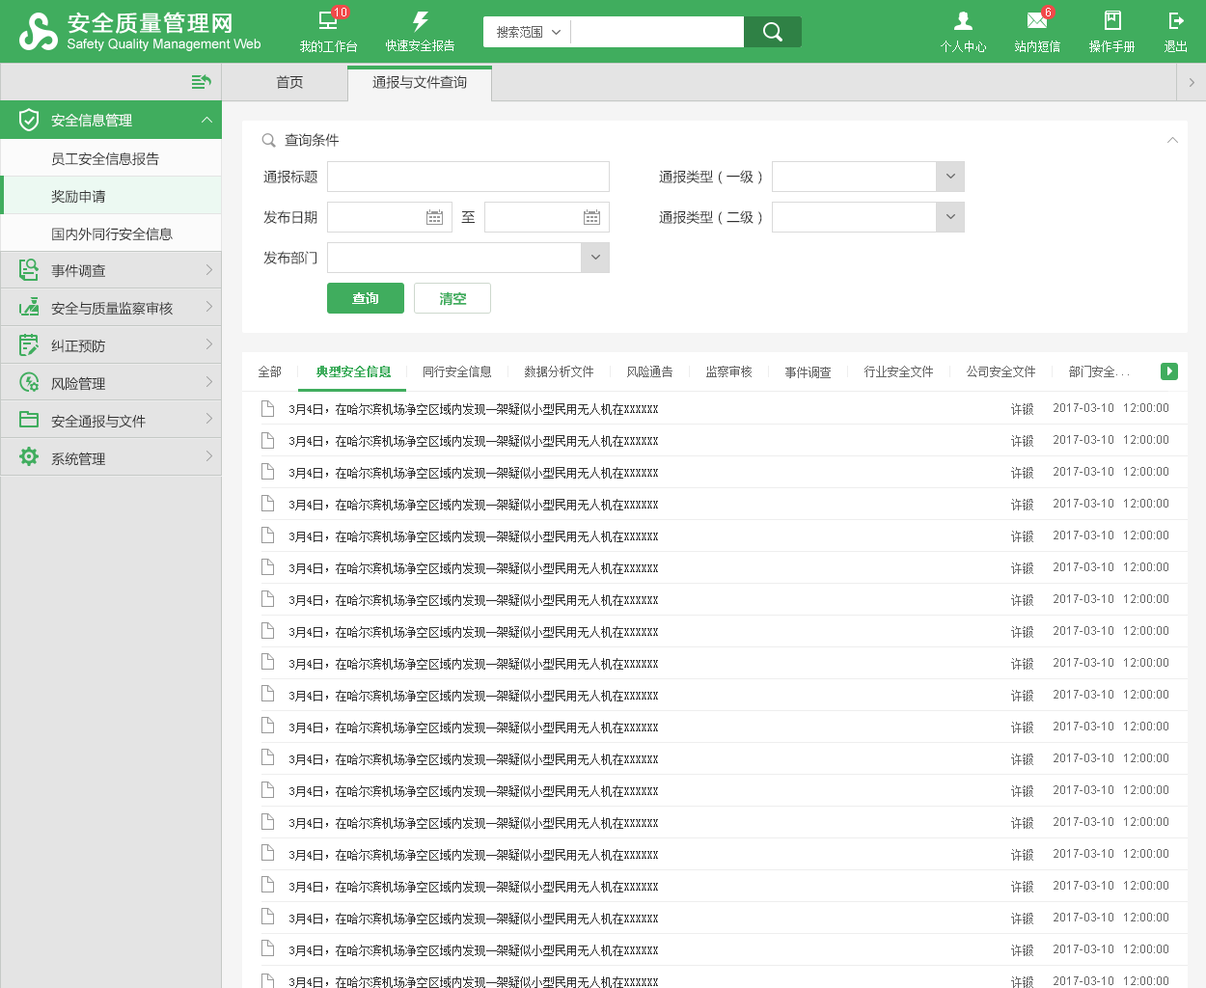
<style>
.page{position:relative;width:1206px;height:988px;background:#ffffff}
.page>*{position:absolute;margin:0}
.t1{font:13.5px "MicrosoftYaHei";color:#333333}
.t2{font:13.5px "MicrosoftYaHei";color:#ffffff}
.t3{font:13.5px/37.6px "MicrosoftYaHei";color:#333333}
.t4{font:13.5px "MicrosoftYaHei-Bold";color:#ffffff}
.t5{font:13.5px "MicrosoftYaHei-Bold";color:#40ad5e}
.t6{font:11.6px "SimSun";color:#666666}
.t7{font:11.6px "SimSun";color:#40ad5e;font-weight:bold}
</style>
<div class="page">
<p class="t1" style="left:276px;top:75px;width:27px;height:14px">首页</p>
<p class="t1" style="left:373px;top:75px;width:94px;height:14px">通报与文件查询</p>
<p class="t2" style="left:51px;top:113px;width:81px;height:14px">安全信息管理</p>
<p class="t1" style="left:285px;top:133px;width:54px;height:14px">查询条件</p>
<p class="t3" style="left:51px;top:152px;width:122px;height:89px">员工安全信息报告<br>奖励申请<br>国内外同行安全信息</p>
<p class="t1" style="left:263px;top:170px;width:55px;height:13px">通报标题</p>
<p class="t1" style="left:659px;top:170px;width:103px;height:14px">通报类型（一级）</p>
<p class="t1" style="left:263px;top:210px;width:55px;height:14px">发布日期</p>
<p class="t1" style="left:461px;top:211px;width:14px;height:12px">至</p>
<p class="t1" style="left:659px;top:210px;width:103px;height:15px">通报类型（二级）</p>
<p class="t1" style="left:263px;top:251px;width:54px;height:13px">发布部门</p>
<p class="t3" style="left:51px;top:263px;width:122px;height:203px">事件调查<br>安全与质量监察审核<br>纠正预防<br>风险管理<br>安全通报与文件<br>系统管理</p>
<p class="t4" style="left:352px;top:292px;width:26px;height:12px">查询</p>
<p class="t5" style="left:439px;top:291px;width:28px;height:15px">清空</p>
<p class="t6" style="left:259px;top:366px;width:22px;height:11px">全部</p>
<p class="t7" style="left:317px;top:366px;width:74px;height:11px">典型安全信息</p>
<p class="t6" style="left:424px;top:366px;width:67px;height:11px">同行安全信息</p>
<p class="t6" style="left:525px;top:366px;width:69px;height:11px">数据分析文件</p>
<p class="t6" style="left:627px;top:366px;width:46px;height:11px">风险通告</p>
<p class="t6" style="left:707px;top:366px;width:45px;height:11px">监察审核</p>
<p class="t6" style="left:865px;top:366px;width:68px;height:11px">行业安全文件</p>
<p class="t6" style="left:967px;top:366px;width:69px;height:11px">公司安全文件</p>
<p class="t6" style="left:1069px;top:366px;width:60px;height:11px">部门安全...</p>
<p class="t6" style="left:786px;top:367px;width:45px;height:11px">事件调查</p>
</div>
